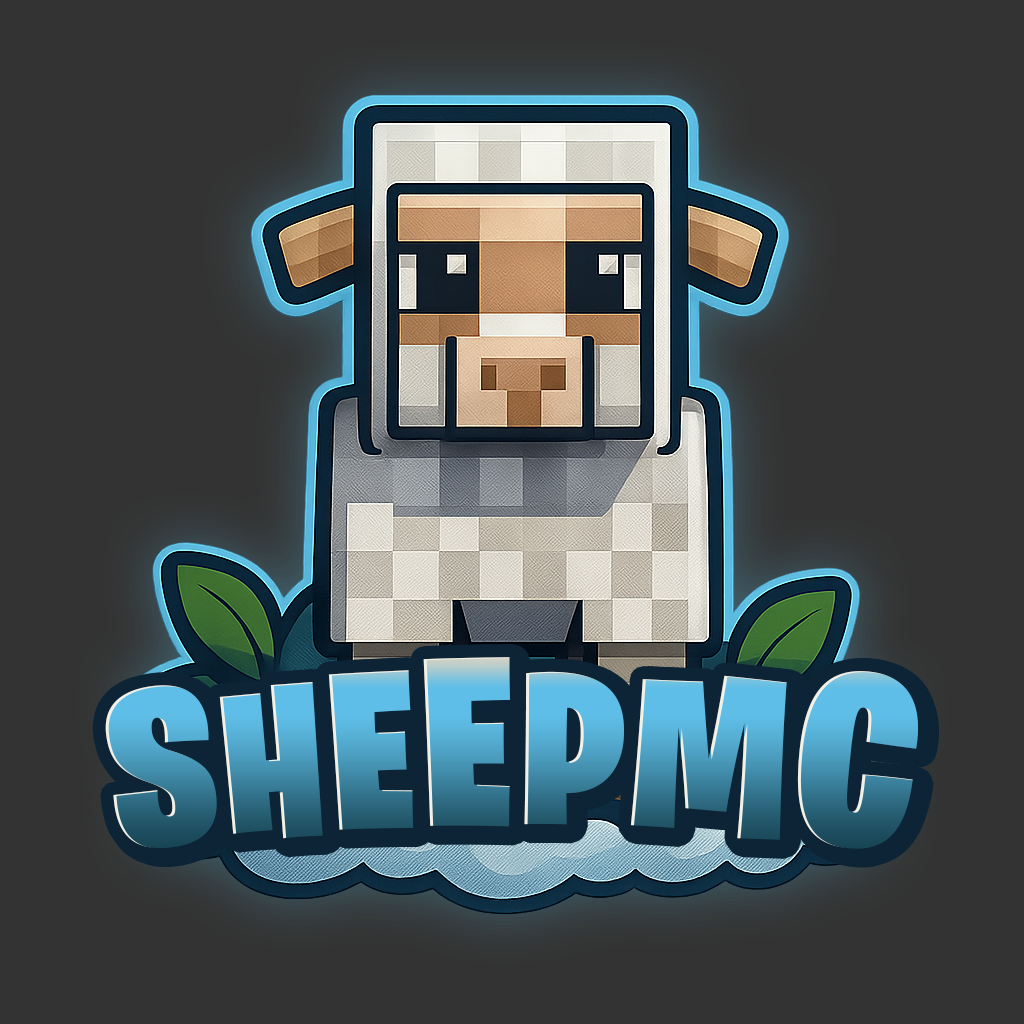
<style>
.page{position:relative;width:1024px;height:1024px;background:#333333}
.page>*{position:absolute;margin:0}
.t1{font:220px "BurbankBigCondensed-Black";letter-spacing:0.03em}
.t2{font:224.6px "BurbankBigCondensed-Black";letter-spacing:0.03em}
.t3{font:209.5px "BurbankBigCondensed-Black";letter-spacing:0.03em}
.t4{font:240.9px "BurbankBigCondensed-Black";letter-spacing:0.03em}
.t5{font:242.1px "BurbankBigCondensed-Black";letter-spacing:0.03em}
</style>
<div class="page">
<p class="t1" style="left:105px;top:657px;width:814px;height:192px"><span class="t2">S</span><span class="t3">H</span><span class="t2">E</span><span class="t4">E</span>PM<span class="t5">C</span></p>
</div>
